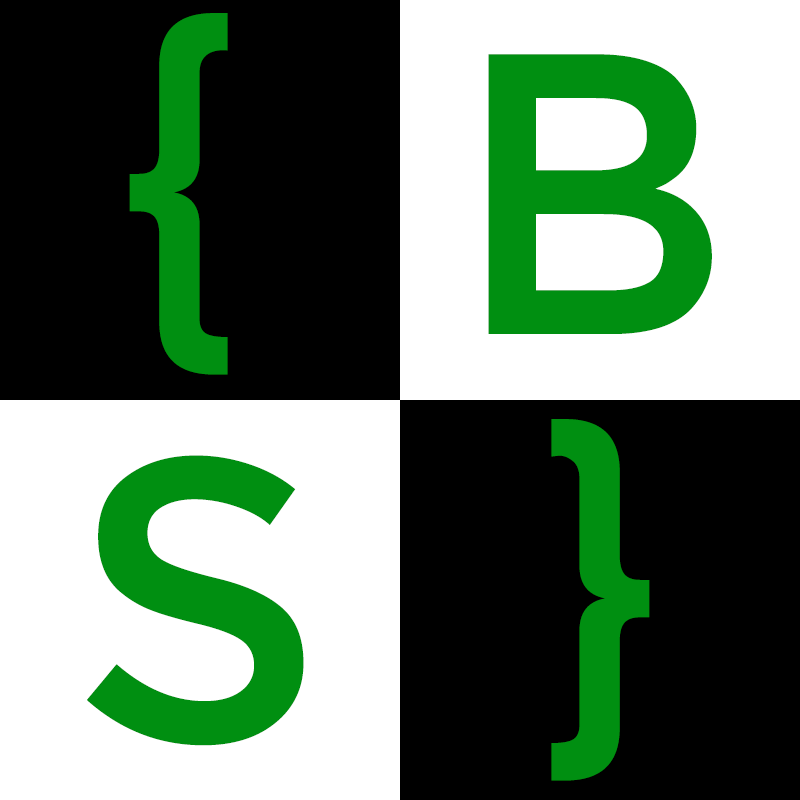
<style>
.page{position:relative;width:800px;height:800px;background:#000000}
.page>*{position:absolute;margin:0}
.t1{font:400px "Montserrat-Regular";color:#008f11}
</style>
<div class="page">
<p class="t1" style="left:129px;top:13px;width:99px;height:362px">{</p>
<p class="t1" style="left:488px;top:54px;width:224px;height:280px">B</p>
<p class="t1" style="left:551px;top:419px;width:99px;height:362px">}</p>
<p class="t1" style="left:87px;top:455px;width:217px;height:291px">S</p>
</div>
